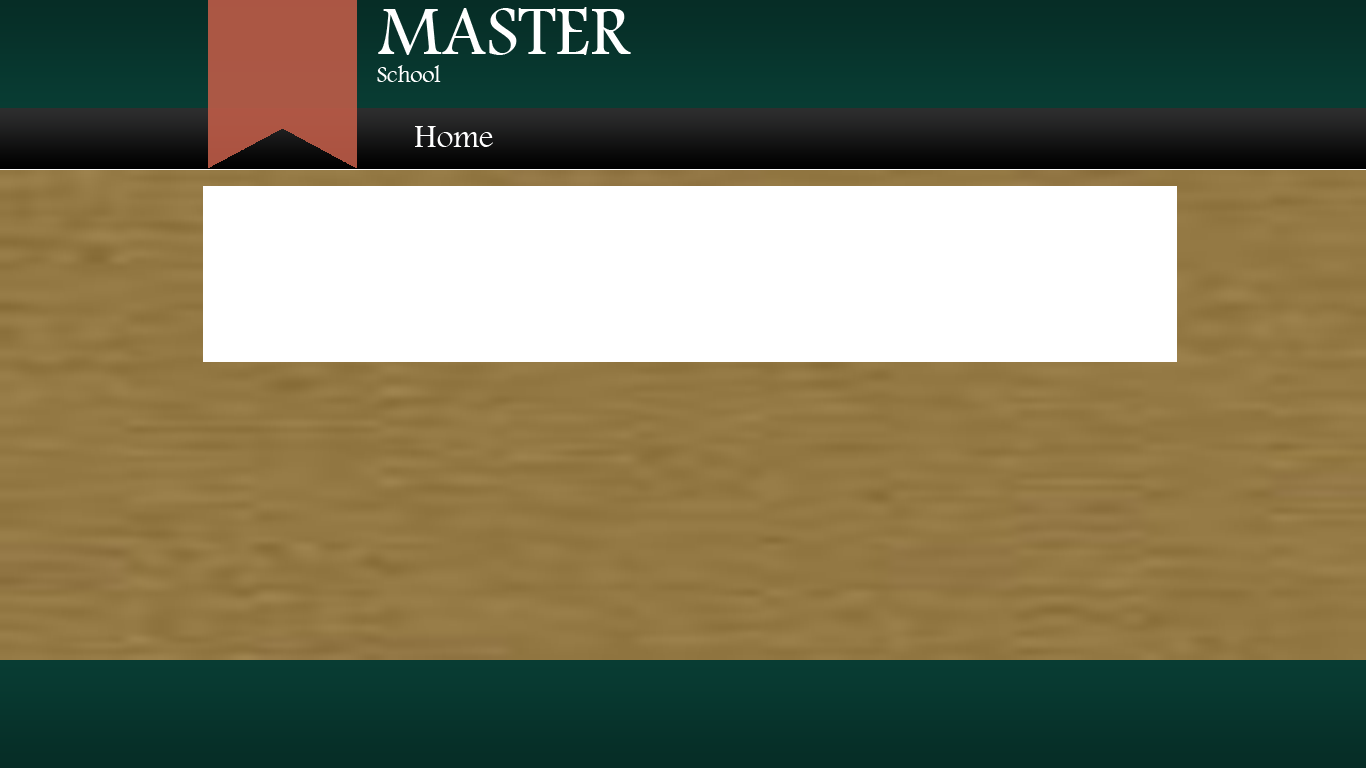
<style>
.page{position:relative;width:1366px;height:768px}
.page>*{position:absolute;margin:0}
.t1{font:72px "FootlightMTLight";color:#ffffff}
.t2{font:24px "FootlightMTLight";color:#fefefe}
.t3{font:33px "FootlightMTLight";color:#ffffff}
</style>
<div class="page">
<p class="t1" style="left:378px;top:7px;width:253px;height:48px">MASTER</p>
<p class="t2" style="left:377px;top:65px;width:64px;height:17px">School</p>
<p class="t3" style="left:415px;top:126px;width:78px;height:21px">Home</p>
</div>
